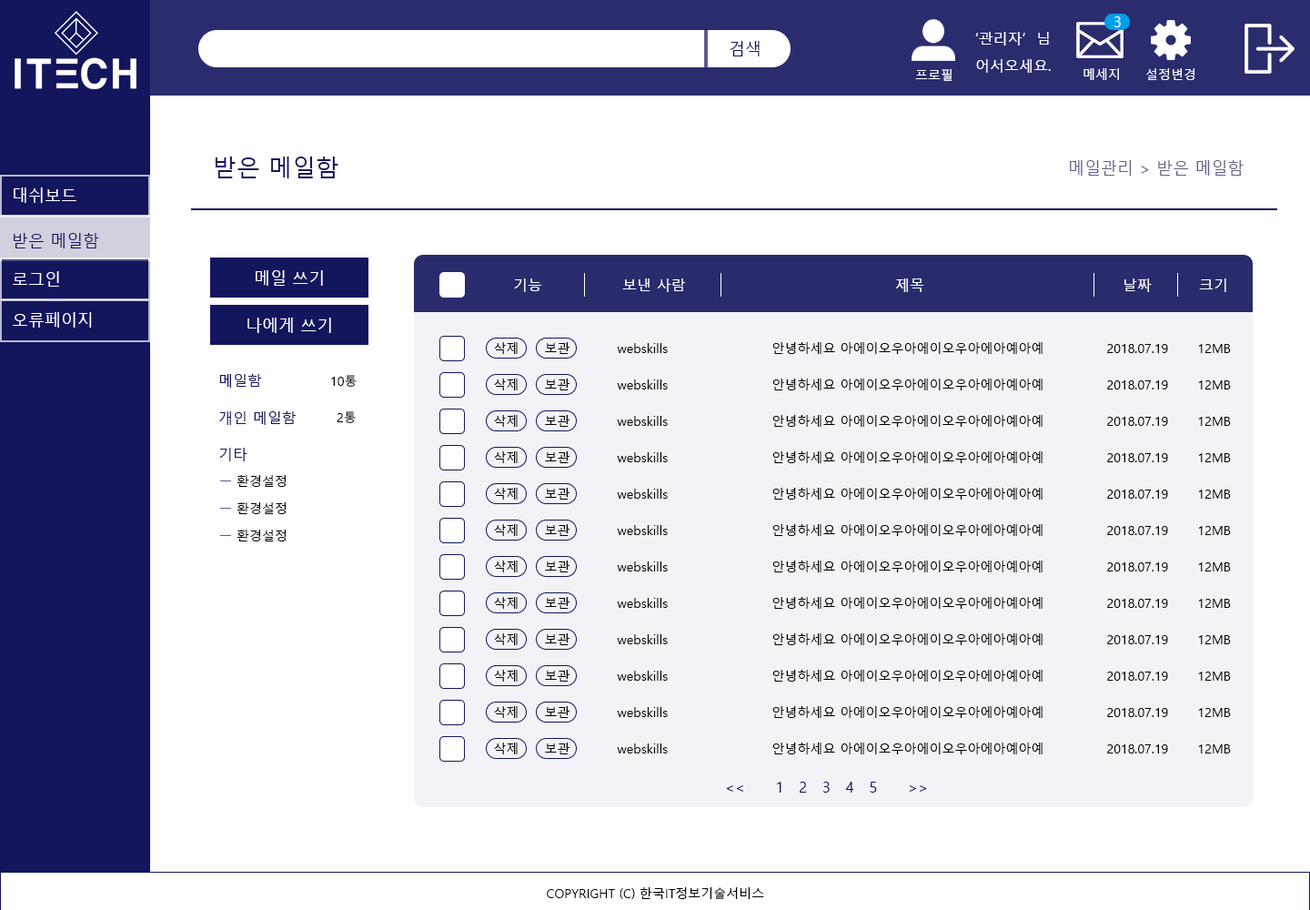
<style>
.page{position:relative;width:1310px;height:910px;background:#ffffff}
.page>*{position:absolute;margin:0}
.t1{font:14.6px "MalgunGothic";color:#ffffff}
.t2{font:16.4px "MalgunGothic";color:#13155d}
.t3{font:12.7px "MalgunGothic";color:#ffffff}
.t4{font:23.7px "MalgunGothic";color:#13155d}
.t5{font:16.4px "MalgunGothic";color:#5f6086}
.t6{font:16.4px "MalgunGothic";color:#ffffff}
.t7{font:12.7px/36.4px "MalgunGothic";color:#000000}
.t8{font:14.6px "MalgunGothic";color:#13155d}
.t9{font:12.7px "MalgunGothic";color:#000000}
</style>
<div class="page">
<p class="t1" style="left:1114px;top:16px;width:7px;height:11px">3</p>
<p class="t2" style="left:730px;top:41px;width:30px;height:15px">검색</p>
<p class="t1" style="left:976px;top:32px;width:73px;height:13px">‘관리자’  님</p>
<p class="t1" style="left:976px;top:59px;width:75px;height:14px">어서오세요.</p>
<p class="t3" style="left:915px;top:68px;width:38px;height:13px">프로필</p>
<p class="t3" style="left:1084px;top:68px;width:35px;height:12px">메세지</p>
<p class="t3" style="left:1147px;top:68px;width:48px;height:12px">설정변경</p>
<p class="t4" style="left:215px;top:157px;width:124px;height:21px">받은 메일함</p>
<p class="t5" style="left:1070px;top:160px;width:174px;height:16px">메일관리 &gt; 받은 메일함</p>
<p class="t6" style="left:14px;top:187px;width:62px;height:16px">대쉬보드</p>
<p class="t2" style="left:14px;top:233px;width:85px;height:15px">받은 메일함</p>
<p class="t6" style="left:13px;top:271px;width:46px;height:16px">로그인</p>
<p class="t6" style="left:256px;top:270px;width:67px;height:16px">메일 쓰기</p>
<p class="t1" style="left:514px;top:278px;width:28px;height:14px">기능</p>
<p class="t1" style="left:622px;top:278px;width:63px;height:14px">보낸 사람</p>
<p class="t1" style="left:895px;top:278px;width:30px;height:14px">제목</p>
<p class="t1" style="left:1125px;top:278px;width:27px;height:14px">날짜</p>
<p class="t1" style="left:1199px;top:278px;width:28px;height:14px">크기</p>
<p class="t6" style="left:13px;top:312px;width:79px;height:16px">오류페이지</p>
<p class="t6" style="left:248px;top:318px;width:83px;height:15px">나에게 쓰기</p>
<p class="t7" style="left:494px;top:342px;width:24px;height:412px">삭제<br>삭제<br>삭제<br>삭제<br>삭제<br>삭제<br>삭제<br>삭제<br>삭제<br>삭제<br>삭제<br>삭제</p>
<p class="t7" style="left:545px;top:342px;width:25px;height:412px">보관<br>보관<br>보관<br>보관<br>보관<br>보관<br>보관<br>보관<br>보관<br>보관<br>보관<br>보관</p>
<p class="t7" style="left:617px;top:343px;width:51px;height:410px">webskills<br>webskills<br>webskills<br>webskills<br>webskills<br>webskills<br>webskills<br>webskills<br>webskills<br>webskills<br>webskills<br>webskills</p>
<p class="t7" style="left:773px;top:342px;width:270px;height:412px">안녕하세요 아에이오우아에이오우아에아예아예<br>안녕하세요 아에이오우아에이오우아에아예아예<br>안녕하세요 아에이오우아에이오우아에아예아예<br>안녕하세요 아에이오우아에이오우아에아예아예<br>안녕하세요 아에이오우아에이오우아에아예아예<br>안녕하세요 아에이오우아에이오우아에아예아예<br>안녕하세요 아에이오우아에이오우아에아예아예<br>안녕하세요 아에이오우아에이오우아에아예아예<br>안녕하세요 아에이오우아에이오우아에아예아예<br>안녕하세요 아에이오우아에이오우아에아예아예<br>안녕하세요 아에이오우아에이오우아에아예아예<br>안녕하세요 아에이오우아에이오우아에아예아예</p>
<p class="t7" style="left:1107px;top:344px;width:61px;height:409px">2018.07.19<br>2018.07.19<br>2018.07.19<br>2018.07.19<br>2018.07.19<br>2018.07.19<br>2018.07.19<br>2018.07.19<br>2018.07.19<br>2018.07.19<br>2018.07.19<br>2018.07.19</p>
<p class="t7" style="left:1198px;top:344px;width:33px;height:409px">12MB<br>12MB<br>12MB<br>12MB<br>12MB<br>12MB<br>12MB<br>12MB<br>12MB<br>12MB<br>12MB<br>12MB</p>
<p class="t8" style="left:219px;top:374px;width:43px;height:14px">메일함</p>
<p class="t9" style="left:331px;top:375px;width:26px;height:12px">10통</p>
<p class="t8" style="left:219px;top:411px;width:77px;height:14px">개인 메일함</p>
<p class="t9" style="left:337px;top:411px;width:19px;height:12px">2통</p>
<p class="t8" style="left:219px;top:448px;width:29px;height:13px">기타</p>
<p class="t9" style="left:237px;top:475px;width:50px;height:12px">환경설정</p>
<p class="t9" style="left:237px;top:502px;width:50px;height:12px">환경설정</p>
<p class="t9" style="left:237px;top:530px;width:50px;height:11px">환경설정</p>
<p class="t8" style="left:726px;top:782px;width:201px;height:11px">&lt;&lt;      1   2   3   4   5      &gt;&gt;</p>
<p class="t9" style="left:547px;top:887px;width:217px;height:12px">COPYRIGHT (C) 한국IT정보기술서비스</p>
</div>
